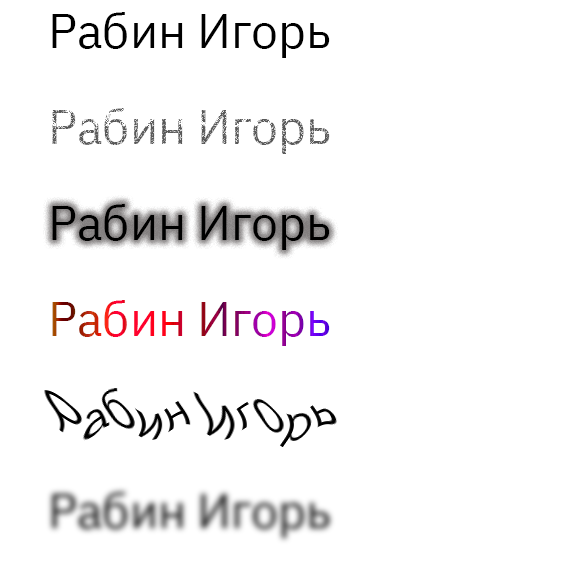
<style>
.page{position:relative;width:576px;height:576px;background:#ffffff}
.page>*{position:absolute;margin:0}
.t1{font:48px "IBMPlexSans";color:#000000}
.t2{font:48px "IBMPlexSans"}
</style>
<div class="page">
<p class="t1" style="left:52px;top:12px;width:278px;height:46px">Рабин Игорь</p>
<p class="t2" style="left:52px;top:108px;width:278px;height:46px">Рабин Игорь</p>
<p class="t1" style="left:52px;top:204px;width:278px;height:46px">Рабин Игорь</p>
<p class="t2" style="left:52px;top:300px;width:278px;height:46px">Рабин Игорь</p>
</div>
